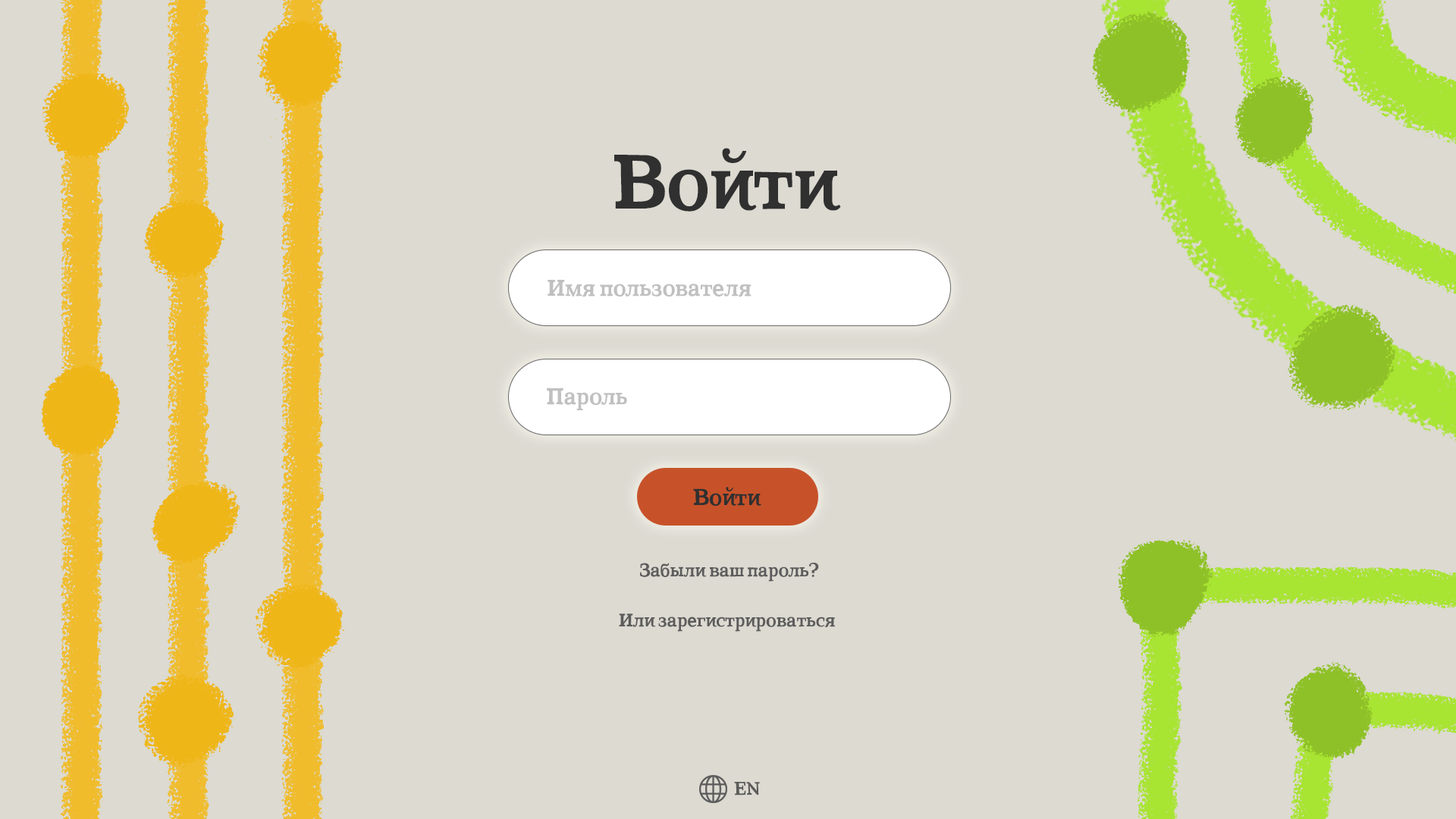
<style>
.page{position:relative;width:1456px;height:819px;background:#dcdad1}
.page>*{position:absolute;margin:0}
.t1{font:75.8px "CoatsBold-Bold";color:#303030}
.t2{font:22.7px "CoatsBold-Bold";color:#c0c0c0}
.t3{font:22.7px "CoatsBold-Bold";color:#303030}
.t4{font:18.2px "CoatsBold-Bold";color:#5c5c5c}
</style>
<div class="page">
<p class="t1" style="left:614px;top:148px;width:227px;height:64px">Войти</p>
<p class="t2" style="left:548px;top:280px;width:203px;height:17px">Имя пользователя</p>
<p class="t2" style="left:547px;top:388px;width:80px;height:22px">Пароль</p>
<p class="t3" style="left:693px;top:487px;width:68px;height:19px">Войти</p>
<p class="t4" style="left:640px;top:563px;width:179px;height:19px">Забыли ваш пароль?</p>
<p class="t4" style="left:619px;top:613px;width:216px;height:19px">Или зарегистрироваться</p>
<p class="t4" style="left:734px;top:782px;width:26px;height:13px">EN</p>
</div>
